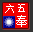
<style>
.page{position:relative;width:33px;height:32px;background:#f20000}
.page>*{position:absolute;margin:0}
.t1{font:10.4px "SimSun";color:#ffffff}
.t2{font:11.7px "SimSun";color:#ffffff}
</style>
<div class="page">
<p class="t1" style="left:5px;top:4px;width:20px;height:9px">六五</p>
<p class="t2" style="left:16px;top:15px;width:11px;height:12px">奉</p>
</div>
